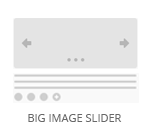
<style>
.page{position:relative;width:150px;height:130px;background:#ffffff}
.page>*{position:absolute;margin:0}
.t1{font:11px "OpenSans";color:#686868;text-transform:uppercase}
</style>
<div class="page">
<p class="t1" style="left:28px;top:114px;width:94px;height:8px">Big Image Slider</p>
</div>
